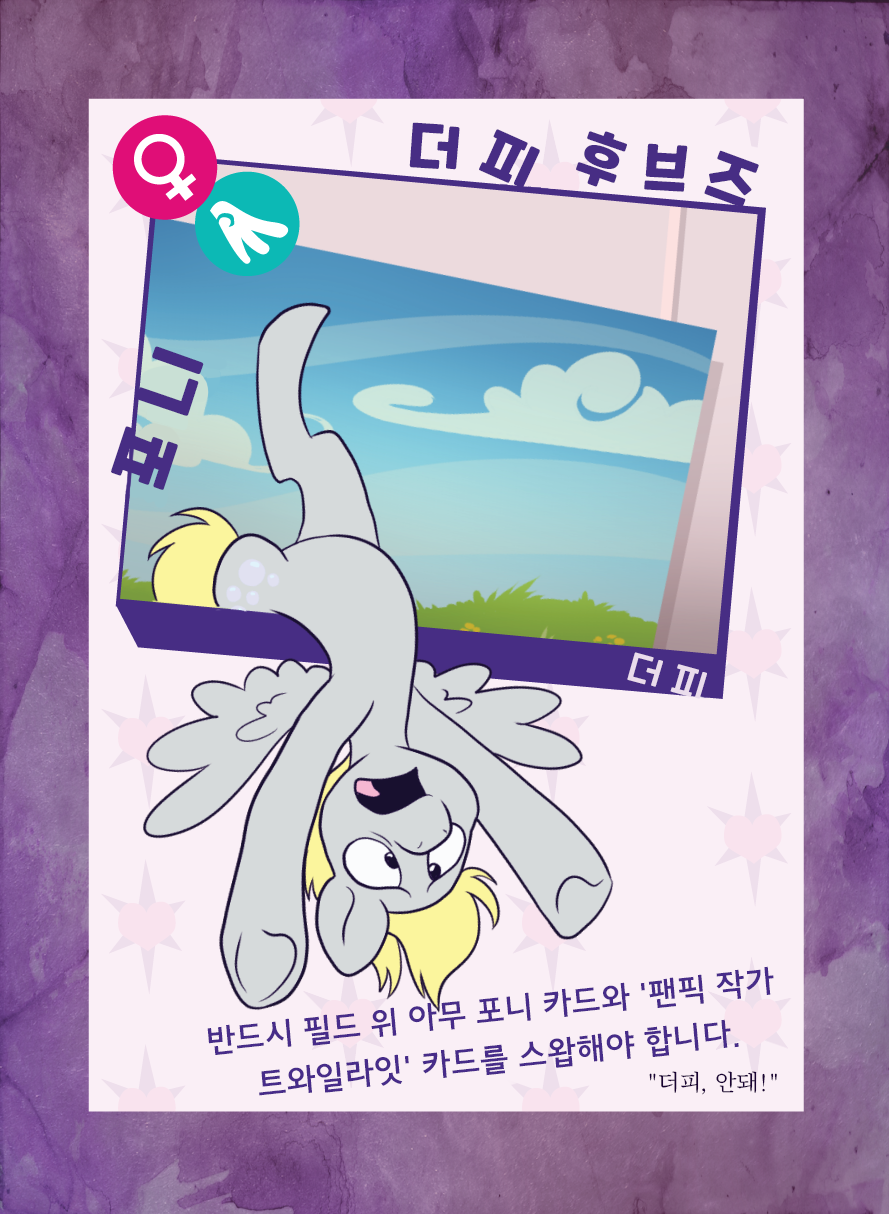
<style>
.page{position:relative;width:889px;height:1214px;background:#faeff6}
.page>*{position:absolute;margin:0}
.t1{font:60px "CookieRunOTF-Bold";color:#472d84}
.t2{font:60px "CookieRunOTF-Bold";color:#472d84;scale:1.04 1}
.t3{font:72.5px "CookieRunOTF-Bold";color:#472d84}
.t4{font:38.7px "CookieRunOTF-Regular";color:#eadcec}
.t5{font:32px/48px "JejuGothic";color:#472c89}
.t6{font:24px "JejuMyeongjo";color:#190233}
</style>
<div class="page">
<p class="t1" style="left:409px;top:122px;width:51px;height:48px;rotate:5deg">더</p>
<p class="t1" style="left:479px;top:129px;width:61px;height:59px;rotate:25deg">피</p>
<p class="t1" style="left:576px;top:131px;width:51px;height:56px;rotate:20deg">후</p>
<p class="t1" style="left:644px;top:143px;width:44px;height:49px;rotate:4deg">브</p>
<p class="t2" style="left:704px;top:150px;width:55px;height:58px;rotate:21deg">즈</p>
<p class="t3" style="left:111px;top:346px;width:93px;height:144px;rotate:-71deg">포 니</p>
<p class="t4" style="left:627px;top:652px;width:80px;height:47px;rotate:17deg">더 피</p>
<p class="t5" style="left:207px;top:966px;width:567px;height:130px;text-align:center;rotate:-6deg">반드시 필드 위 아무 포니 카드와 '팬픽 작가 <br>트와일라잇' 카드를 스왑해야 합니다.</p>
<p class="t6" style="left:649px;top:1071px;width:128px;height:24px">"더피, 안돼!"</p>
</div>
